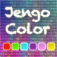
<style>
.page{position:relative;width:57px;height:57px}
.page>*{position:absolute;margin:0}
.t1{font:14px "Chalkduster";color:#ffffff}
</style>
<div class="page">
<p class="t1" style="left:5px;top:6px;width:45px;height:29px;text-align:center">Jengo<br>Color</p>
</div>
